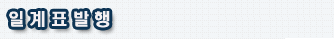
<style>
.page{position:relative;width:335px;height:39px;background:#f3f6f8}
.page>*{position:absolute;margin:0}
.t1{font:18px "ÇÑ¾ç°¡´ÂÇìµå¶óÀÎ";letter-spacing:0.2em;color:#f4f0f2}
</style>
<div class="page">
<p class="t1" style="left:9px;top:11px;width:101px;height:17px">일계표발행</p>
</div>
